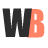
<style>
.page{position:relative;width:48px;height:48px;background:#ffffff}
.page>*{position:absolute;margin:0}
.t1{font:36px "Impact";letter-spacing:-0.025em;color:#2e2e2e}
.t2{font:36px "Impact";letter-spacing:-0.025em;color:#fe8366}
</style>
<div class="page">
<p class="t1" style="left:2px;top:8px;width:30px;height:29px">W</p>
<p class="t2" style="left:27px;top:9px;width:18px;height:29px">B</p>
</div>
